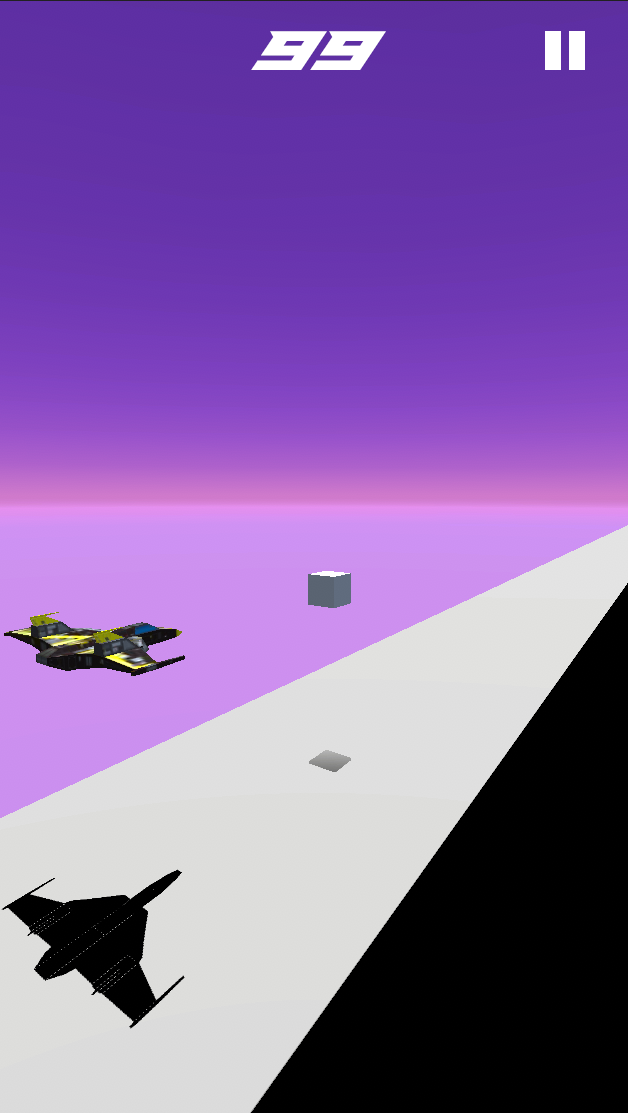
<style>
.page{position:relative;width:628px;height:1113px}
.page>*{position:absolute;margin:0}
.t1{font:60px "PaladinsSuper-Italic";color:#ffffff}
</style>
<div class="page">
<p class="t1" style="left:251px;top:31px;width:135px;height:39px">99</p>
</div>
